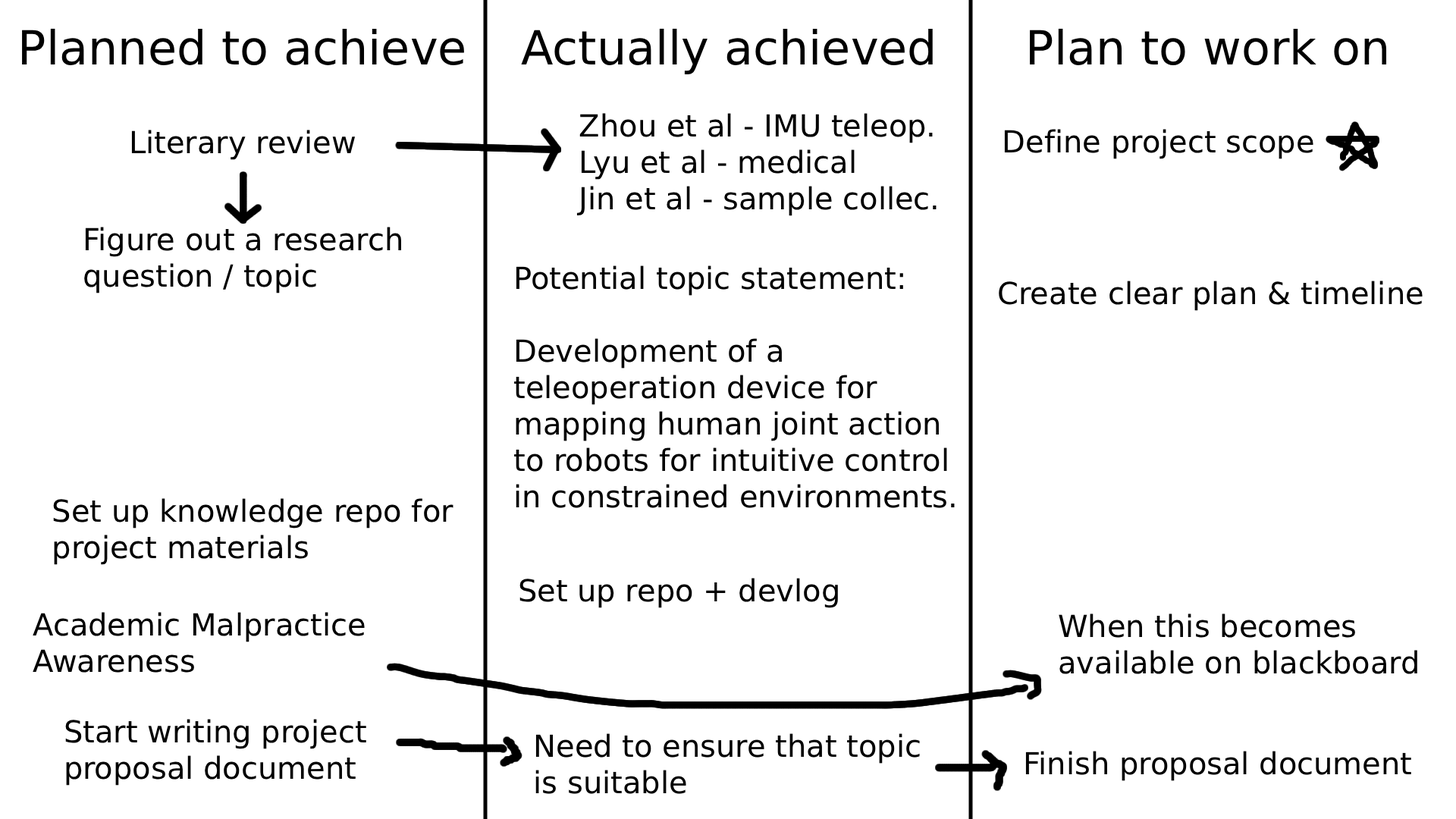
<style>
.page{position:relative;width:1456px;height:819px;background:#ffffff}
.page>*{position:absolute;margin:0}
.t1{font:47px "DejaVuSans";color:#000000}
.t2{font:30.3px "DejaVuSans";color:#000000}
</style>
<div class="page">
<p class="t1" style="left:22px;top:28px;width:442px;height:37px">Planned to achieve</p>
<p class="t1" style="left:521px;top:28px;width:412px;height:46px">Actually achieved</p>
<p class="t1" style="left:1030px;top:28px;width:357px;height:37px">Plan to work on</p>
<p class="t2" style="left:576px;top:113px;width:361px;height:103px">Zhou et al - IMU teleop.<br>Lyu et al - medical<br>Jin et al - sample collec.</p>
<p class="t2" style="left:131px;top:130px;width:225px;height:30px">Literary review</p>
<p class="t2" style="left:1004px;top:129px;width:309px;height:30px">Define project scope</p>
<p class="t2" style="left:84px;top:227px;width:317px;height:66px">Figure out a research<br>question / topic</p>
<p class="t2" style="left:514px;top:265px;width:441px;height:243px">Potential topic statement:<br><br>Development of a <br>teleoperation device for<br>mapping human joint action<br>to robots for intuitive control<br>in constrained environments.</p>
<p class="t2" style="left:999px;top:281px;width:424px;height:30px">Create clear plan &amp; timeline</p>
<p class="t2" style="left:53px;top:498px;width:400px;height:67px">Set up knowledge repo for<br>project materials</p>
<p class="t2" style="left:519px;top:578px;width:319px;height:30px">Set up repo + devlog</p>
<p class="t2" style="left:33px;top:612px;width:332px;height:61px">Academic Malpractice<br>Awareness</p>
<p class="t2" style="left:1059px;top:613px;width:358px;height:61px">When this becomes<br>available on blackboard</p>
<p class="t2" style="left:65px;top:719px;width:301px;height:67px">Start writing project<br>proposal document</p>
<p class="t2" style="left:535px;top:733px;width:385px;height:61px">Need to ensure that topic<br>is suitable</p>
<p class="t2" style="left:1025px;top:751px;width:386px;height:30px">Finish proposal document</p>
</div>
